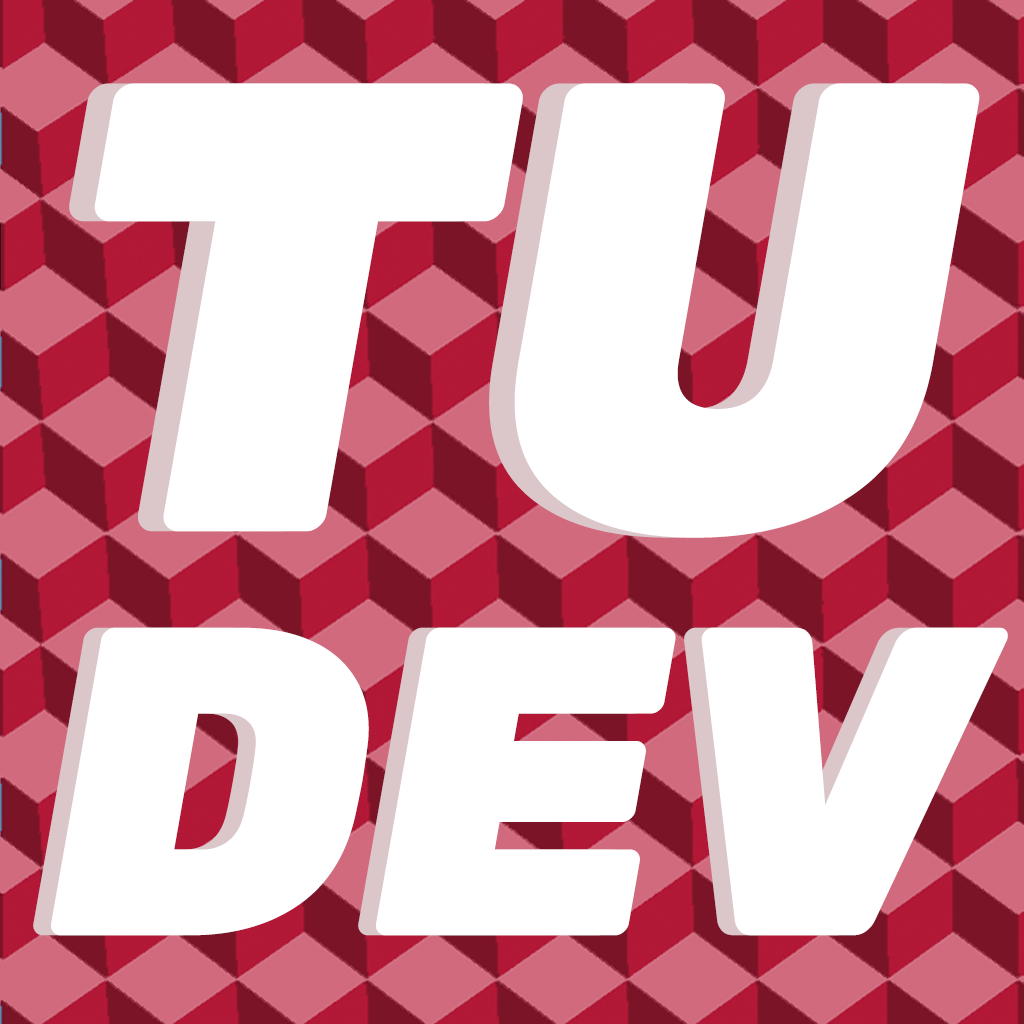
<style>
.page{position:relative;width:1024px;height:1024px;background:#ffffff}
.page>*{position:absolute;margin:0}
.t1{font:639.3px "Rubik-Black";color:#ffffff;font-style:italic}
.t2{font:439.1px "Rubik-Black";color:#ffffff;font-style:italic}
</style>
<div class="page">
<p class="t1" style="left:69px;top:83px;width:885px;height:455px">TU</p>
<p class="t1" style="left:94px;top:83px;width:886px;height:455px">TU</p>
<p class="t2" style="left:33px;top:627px;width:958px;height:309px">DEV</p>
<p class="t2" style="left:51px;top:627px;width:957px;height:309px">DEV</p>
</div>
